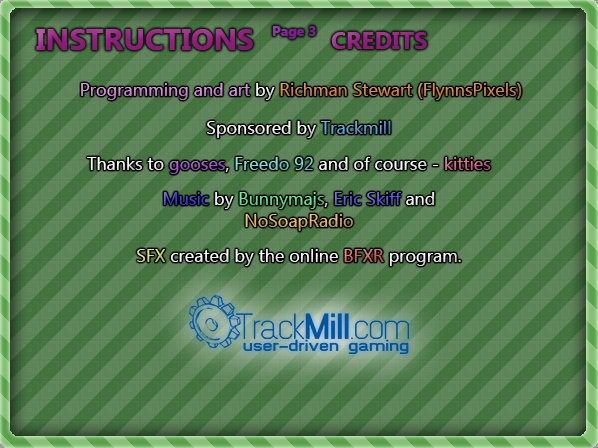
<style>
.page{position:relative;width:598px;height:448px}
.page>*{position:absolute;margin:0}
.t1{font:30px "Ebrima-Bold";color:#9b1d85}
.t2{font:14px "Ebrima-Bold";color:#851d9b}
.t3{font:24px "Ebrima-Bold";color:#9b1d85}
.t4{font:18px "Ebrima";color:#e08a2f}
.t5{font:18px "Ebrima";color:#e188e4}
.t6{font:18px "Ebrima";color:#ffffff}
.t7{font:18px "Ebrima";color:#52a8de}
.t8{font:18px "Ebrima";color:#b34fe1}
.t9{font:18px "Ebrima";color:#fefefe}
.t10{font:18px "Ebrima";color:#63eae8}
.t11{font:18px "Ebrima";color:#ec6296}
.t12{font:18px "Ebrima";color:#ebba52}
.t13{font:18px "Ebrima";color:#3e3ee5}
.t14{font:18px "Ebrima";color:#5ae88c}
.t15{font:18px "Ebrima";color:#5e57ed}
.t16{font:18px "Ebrima";color:#e6eb52}
.t17{font:18px "Ebrima";color:#ee6969}
</style>
<div class="page">
<p class="t1" style="left:36px;top:29px;width:217px;height:21px">INSTRUCTIONS</p>
<p class="t2" style="left:273px;top:26px;width:43px;height:13px">Page 3</p>
<p class="t3" style="left:332px;top:32px;width:95px;height:17px">CREDITS</p>
<p class="t4" style="left:81px;top:83px;width:441px;height:17px"><span class="t5">Programming and art </span><span class="t6">by </span>Richman Stewart (FlynnsPixels)</p>
<p class="t6" style="left:207px;top:121px;width:184px;height:17px">Sponsored by <span class="t7">Trackmill</span></p>
<p class="t6" style="left:87px;top:157px;width:404px;height:17px">Thanks to <span class="t8">gooses</span><span class="t9">, </span><span class="t10">Freedo 92</span> and of course - <span class="t11">kitties</span></p>
<p class="t12" style="left:164px;top:192px;width:271px;height:39px;text-align:center"><span class="t13">Music </span><span class="t9">by </span><span class="t14">Bunnymajs</span><span class="t9">, </span><span class="t15">Eric Skiff</span><span class="t9"> and<br></span>NoSoapRadio</p>
<p class="t6" style="left:137px;top:249px;width:324px;height:17px"><span class="t16">SFX </span>created by the online<span class="t17"> BFXR </span>program.</p>
</div>
